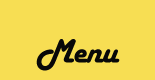
<style>
.page{position:relative;width:155px;height:80px;background:#f7de53}
.page>*{position:absolute;margin:0}
.t1{font:35px "HarlowSolid";letter-spacing:-0.04em;color:#080808}
</style>
<div class="page">
<p class="t1" style="left:36px;top:39px;width:84px;height:32px">Menu</p>
</div>
